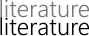
<style>
.page{position:relative;width:89px;height:36px;background:#ffffff}
.page>*{position:absolute;margin:0}
.t1{font:24px "SegoeWP-SemiLight";color:#767676}
.t2{font:24px "SegoeWP-SemiLight";color:#000000}
</style>
<div class="page">
<p class="t1" style="left:0px;top:0px;width:89px;height:18px">literature</p>
<p class="t2" style="left:0px;top:17px;width:89px;height:19px">literature</p>
</div>
